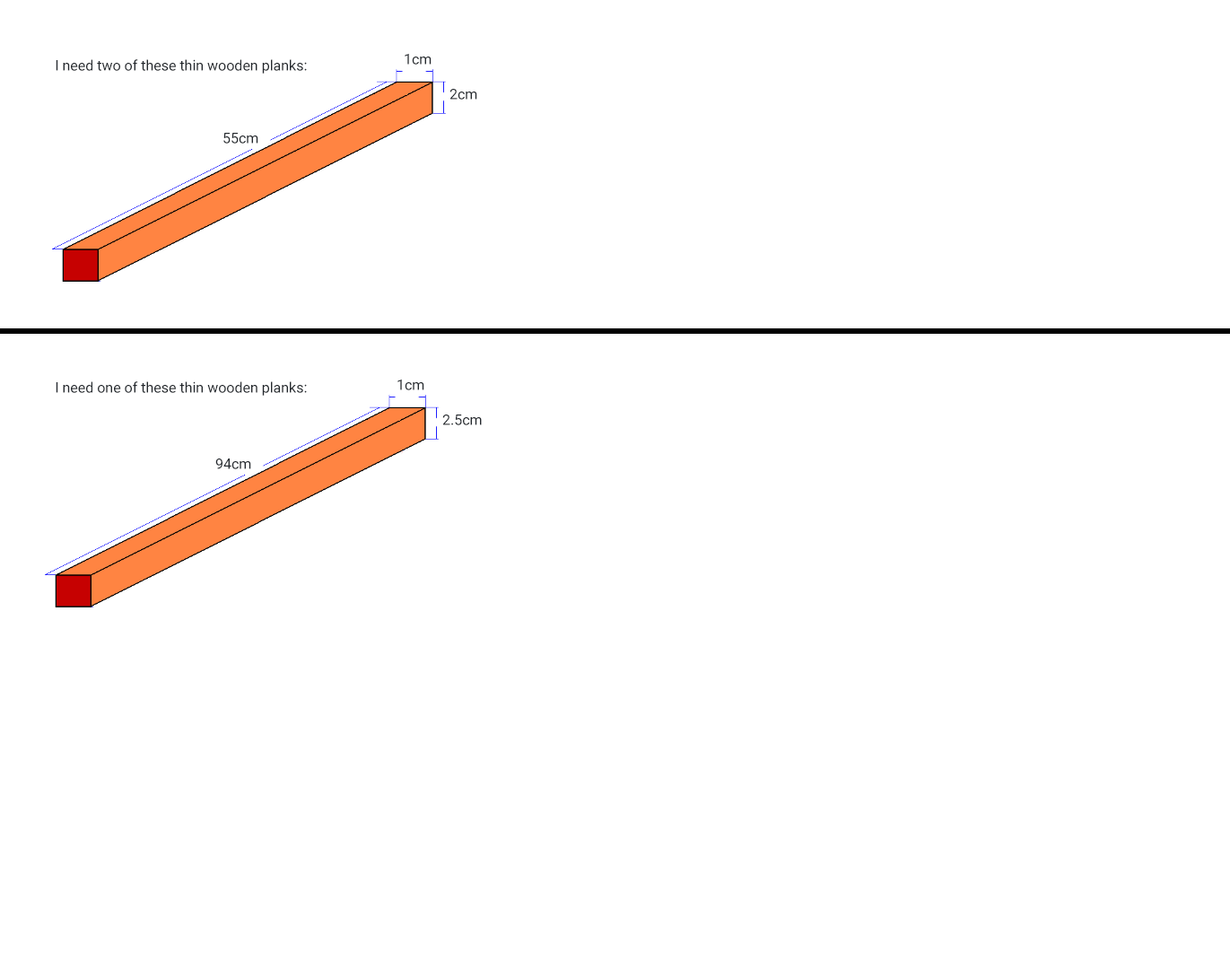
<style>
.page{position:relative;width:1230px;height:969px;background:#ffffff}
.page>*{position:absolute;margin:0}
.t1{font:14.4px "Roboto-Regular";color:#23282d}
</style>
<div class="page">
<p class="t1" style="left:405px;top:54px;width:27px;height:11px">1cm</p>
<p class="t1" style="left:56px;top:59px;width:251px;height:15px">I need two of these thin wooden planks:</p>
<p class="t1" style="left:450px;top:89px;width:27px;height:11px">2cm</p>
<p class="t1" style="left:223px;top:133px;width:35px;height:11px">55cm</p>
<p class="t1" style="left:56px;top:381px;width:251px;height:15px">I need one of these thin wooden planks:</p>
<p class="t1" style="left:398px;top:380px;width:26px;height:10px">1cm</p>
<p class="t1" style="left:442px;top:415px;width:40px;height:10px">2.5cm</p>
<p class="t1" style="left:215px;top:459px;width:36px;height:10px">94cm</p>
</div>
